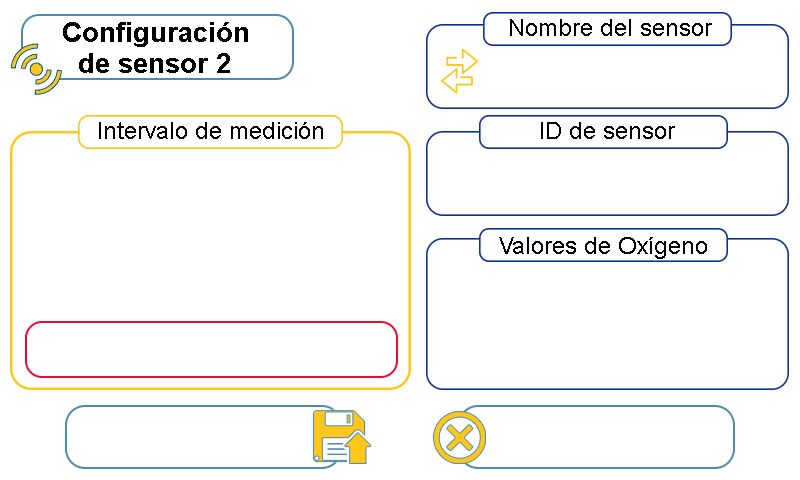
<style>
.page{position:relative;width:800px;height:480px;background:#ffffff}
.page>*{position:absolute;margin:0}
.t1{font:26.7px "Arial-BoldMT";color:#000000}
.t2{font:24.4px "ArialMT";color:#000000}
</style>
<div class="page">
<p class="t1" style="left:63px;top:22px;width:185px;height:51px">Configuración <br>  de sensor 2</p>
<p class="t2" style="left:510px;top:19px;width:202px;height:17px">Nombre del sensor</p>
<p class="t2" style="left:99px;top:122px;width:224px;height:17px">Intervalo de medición</p>
<p class="t2" style="left:541px;top:122px;width:134px;height:17px">ID de sensor</p>
<p class="t2" style="left:499px;top:237px;width:208px;height:22px">Valores de Oxígeno</p>
</div>
